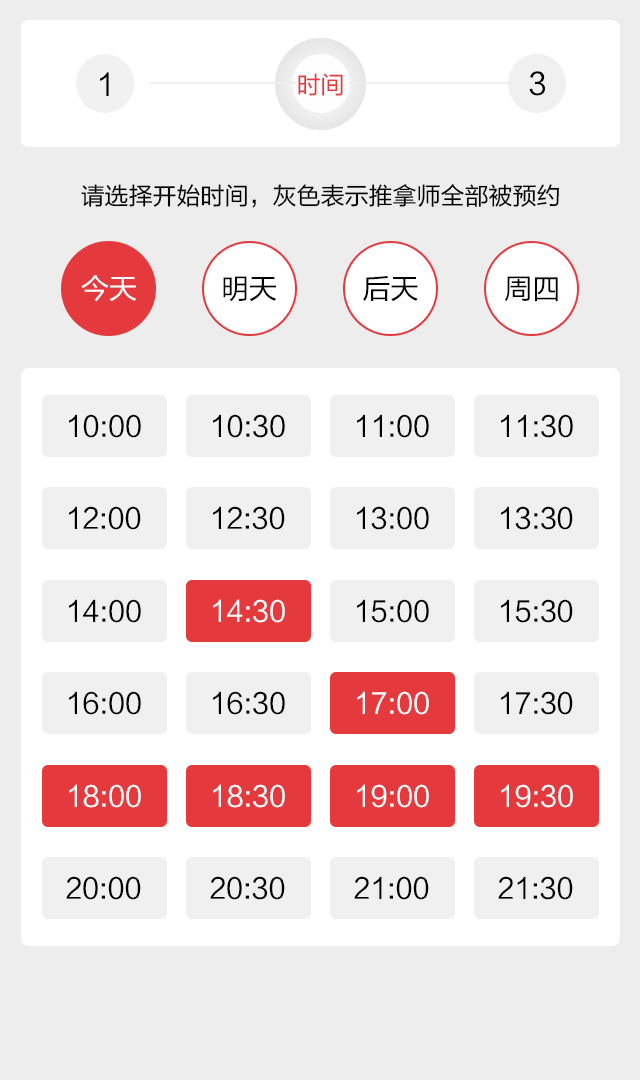
<style>
.page{position:relative;width:640px;height:1080px;background:#ffffff}
.page>*{position:absolute;margin:0}
.t1{font:30px "FZLTHJW--GB1-0";color:#000000}
.t2{font:24px "FZLTHJW--GB1-0";color:#e43a3d}
.t3{font:24px "FZLTHJW--GB1-0";color:#000000}
.t4{font:28px "FZLTHJW--GB1-0";color:#ffffff}
.t5{font:28px "FZLTHJW--GB1-0";color:#000000}
</style>
<div class="page">
<p class="t1" style="left:100px;top:72px;width:9px;height:24px">1</p>
<p class="t2" style="left:298px;top:73px;width:45px;height:23px">时间</p>
<p class="t1" style="left:529px;top:71px;width:16px;height:25px">3</p>
<p class="t3" style="left:81px;top:184px;width:479px;height:24px">请选择开始时间，灰色表示推拿师全部被预约</p>
<p class="t4" style="left:81px;top:275px;width:55px;height:27px">今天</p>
<p class="t5" style="left:223px;top:276px;width:53px;height:26px">明天</p>
<p class="t5" style="left:363px;top:276px;width:55px;height:25px">后天</p>
<p class="t5" style="left:505px;top:276px;width:53px;height:26px">周四</p>
<p class="t5" style="left:69px;top:414px;width:72px;height:24px">10:00</p>
<p class="t5" style="left:213px;top:414px;width:72px;height:24px">10:30</p>
<p class="t5" style="left:357px;top:414px;width:72px;height:24px">11:00</p>
<p class="t5" style="left:501px;top:414px;width:72px;height:24px">11:30</p>
<p class="t5" style="left:69px;top:506px;width:72px;height:24px">12:00</p>
<p class="t5" style="left:213px;top:506px;width:72px;height:24px">12:30</p>
<p class="t5" style="left:357px;top:506px;width:72px;height:24px">13:00</p>
<p class="t5" style="left:501px;top:506px;width:72px;height:24px">13:30</p>
<p class="t5" style="left:69px;top:599px;width:72px;height:24px">14:00</p>
<p class="t4" style="left:213px;top:599px;width:72px;height:24px">14:30</p>
<p class="t5" style="left:357px;top:599px;width:72px;height:24px">15:00</p>
<p class="t5" style="left:501px;top:599px;width:72px;height:24px">15:30</p>
<p class="t5" style="left:69px;top:691px;width:72px;height:24px">16:00</p>
<p class="t5" style="left:213px;top:691px;width:72px;height:24px">16:30</p>
<p class="t4" style="left:357px;top:691px;width:72px;height:24px">17:00</p>
<p class="t5" style="left:501px;top:691px;width:72px;height:24px">17:30</p>
<p class="t4" style="left:69px;top:784px;width:72px;height:24px">18:00</p>
<p class="t4" style="left:213px;top:784px;width:72px;height:24px">18:30</p>
<p class="t4" style="left:357px;top:784px;width:72px;height:24px">19:00</p>
<p class="t4" style="left:501px;top:784px;width:72px;height:24px">19:30</p>
<p class="t5" style="left:66px;top:876px;width:75px;height:24px">20:00</p>
<p class="t5" style="left:210px;top:876px;width:75px;height:24px">20:30</p>
<p class="t5" style="left:354px;top:876px;width:75px;height:24px">21:00</p>
<p class="t5" style="left:498px;top:876px;width:75px;height:24px">21:30</p>
</div>
